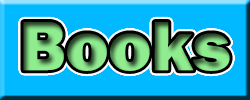
<style>
.page{position:relative;width:250px;height:100px;background:#00b9ff}
.page>*{position:absolute;margin:0}
.t1{font:72px "FranklinGothic-Heavy";color:#90ee90}
</style>
<div class="page">
<p class="t1" style="left:23px;top:22px;width:207px;height:49px">Books</p>
</div>
